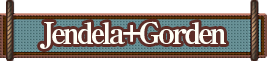
<style>
.page{position:relative;width:267px;height:61px;background:#ffffff}
.page>*{position:absolute;margin:0}
.t1{font:30px "RyuminPro-ExBold";letter-spacing:-0.1em;color:#fffff7}
</style>
<div class="page">
<p class="t1" style="left:40px;top:21px;width:186px;height:28px">Jendela+Gorden</p>
</div>
